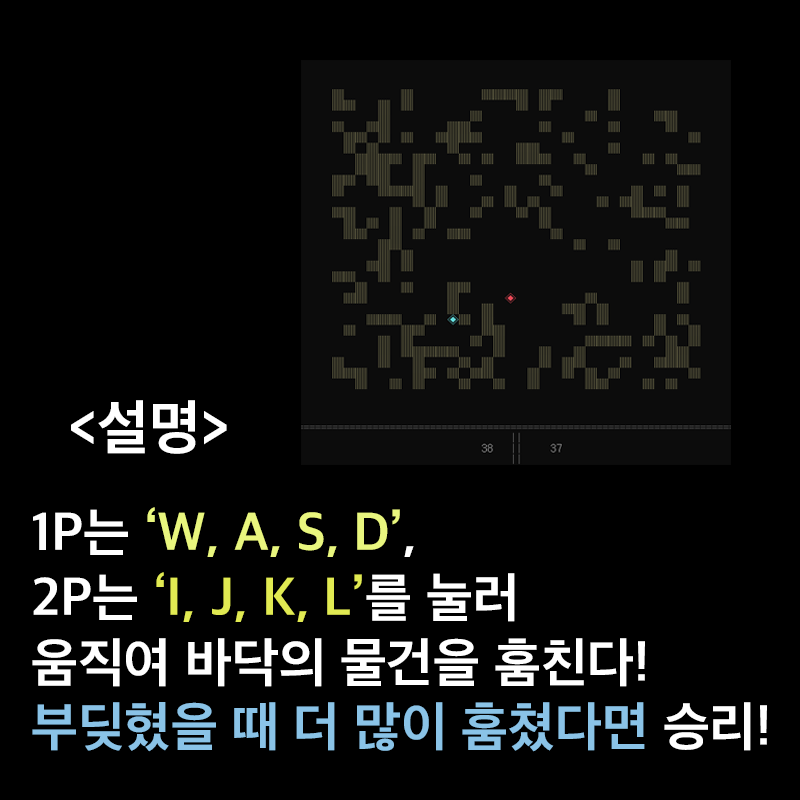
<style>
.page{position:relative;width:800px;height:800px;background:#000000}
.page>*{position:absolute;margin:0}
.t1{font:60px "AppleSDGothicNeoB00";color:#ffffff}
.t2{font:54px "AppleSDGothicNeoB00";color:#ffffff}
.t3{font:54px "AppleSDGothicNeoB00";color:#e9f67e}
.t4{font:54px "AppleSDGothicNeoB00";color:#e1ea52}
.t5{font:54px "AppleSDGothicNeoB00";color:#8ac3e7}
</style>
<div class="page">
<p class="t1" style="left:71px;top:400px;width:156px;height:54px">&lt;설명&gt;</p>
<p class="t2" style="left:32px;top:507px;width:735px;height:245px">1P는 <span class="t3">‘W, A, S, D’</span>,<br>2P는 <span class="t4">‘I, J, K, L’</span>를 눌러<br>움직여 바닥의 물건을 훔친다!<br><span class="t5">부딪혔을 때 더 많이 훔쳤다면</span> 승리!</p>
</div>
